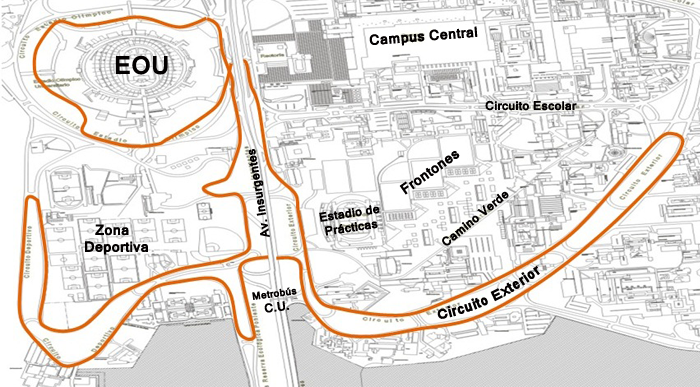
<style>
.page{position:relative;width:700px;height:387px}
.page>*{position:absolute;margin:0}
.t1{font:14px "Kartika-Bold";color:#030000}
.t2{font:24px "Kartika-Bold";color:#030000}
.t3{font:12px "Kartika-Bold";color:#030000}
.t4{font:10px "Kartika-Bold";color:#030000}
</style>
<div class="page">
<p class="t1" style="left:369px;top:26px;width:109px;height:20px;rotate:-5deg">Campus Central</p>
<p class="t2" style="left:116px;top:55px;width:52px;height:20px">EOU</p>
<p class="t3" style="left:485px;top:100px;width:92px;height:11px">Circuito Escolar</p>
<p class="t3" style="left:248px;top:149px;width:22px;height:88px;rotate:-99deg">Av. Insurgentes</p>
<p class="t1" style="left:399px;top:151px;width:61px;height:44px;rotate:-35deg">Frontones</p>
<p class="t3" style="left:442px;top:191px;width:67px;height:55px;rotate:-39deg">Camino Verde</p>
<p class="t3" style="left:319px;top:205px;width:61px;height:31px;rotate:-9deg">Estadio de <br> Prácticas</p>
<p class="t1" style="left:85px;top:224px;width:63px;height:31px"><span class="t3">  </span> Zona<br>Deportiva</p>
<p class="t1" style="left:437px;top:266px;width:103px;height:53px;rotate:-25deg">Circuito Exterior</p>
<p class="t4" style="left:252px;top:287px;width:45px;height:26px;rotate:-8deg">Metrobús<br><span class="t3">   C.U.</span></p>
</div>
